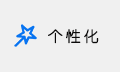
<style>
.page{position:relative;width:120px;height:72px;background:#f0f0f0}
.page>*{position:absolute;margin:0}
.t1{font:14.7px "YouYuan";letter-spacing:0.2em;color:#0b0a0a;font-weight:bold}
</style>
<div class="page">
<p class="t1" style="left:48px;top:29px;width:51px;height:15px">个性化</p>
</div>
